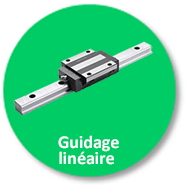
<style>
.page{position:relative;width:185px;height:185px;background:#00cc66}
.page>*{position:absolute;margin:0}
.t1{font:18px/16px "Calibri-Bold";color:#ffffff}
</style>
<div class="page">
<p class="t1" style="left:58px;top:135px;width:61px;height:30px;text-align:center">Guidage<br> linéaire</p>
</div>
